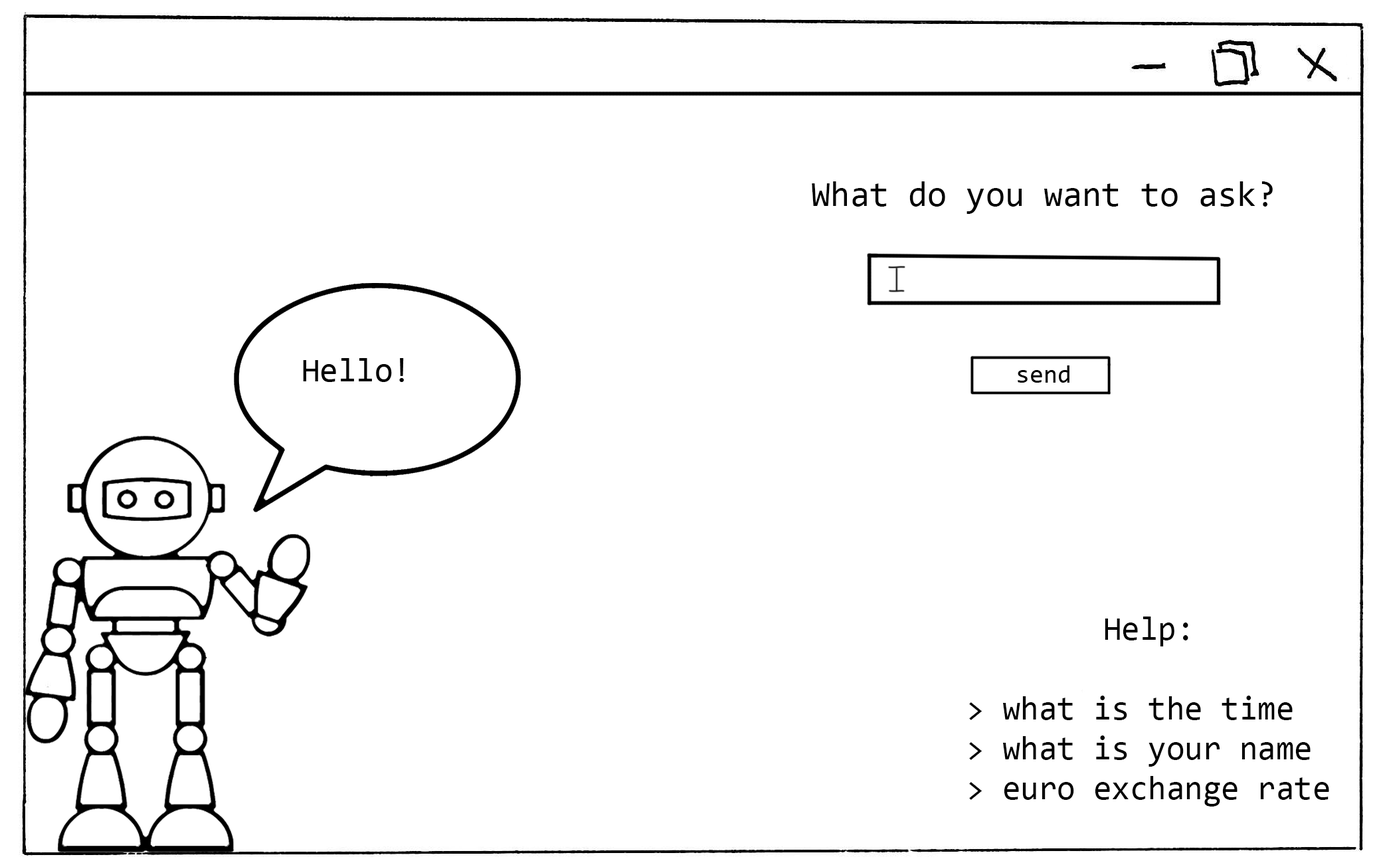
<style>
.page{position:relative;width:1381px;height:863px;background:#ffffff}
.page>*{position:absolute;margin:0}
.t1{font:35.2px "Consolas";color:#000000}
.t2{font:33.2px "Consolas";color:#000000}
</style>
<div class="page">
<p class="t1" style="left:812px;top:181px;width:461px;height:33px">What do you want to ask?</p>
<p class="t2" style="left:969px;top:617px;width:361px;height:190px;text-align:center">Help:<br><br>&gt; what is the time<br>&gt; what is your name<br>&gt; euro exchange rate</p>
</div>
